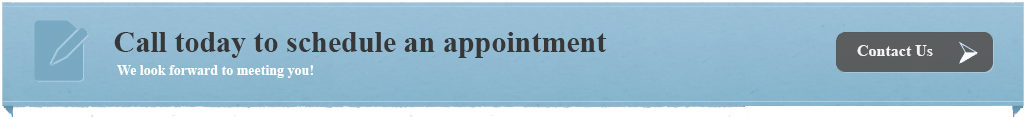
<style>
.page{position:relative;width:1027px;height:117px}
.page>*{position:absolute;margin:0}
.t1{font:30px "TimesNewRomanPS-BoldMT";color:#373737}
.t2{font:16px "TimesNewRomanPS-BoldMT";color:#f4f4f4}
.t3{font:14px "TimesNewRomanPS-BoldMT";color:#ffffff}
</style>
<div class="page">
<p class="t1" style="left:114px;top:32px;width:493px;height:26px">Call today to schedule an appointment</p>
<p class="t2" style="left:857px;top:45px;width:76px;height:11px">Contact Us</p>
<p class="t3" style="left:117px;top:65px;width:196px;height:13px">We look forward to meeting you!</p>
</div>
